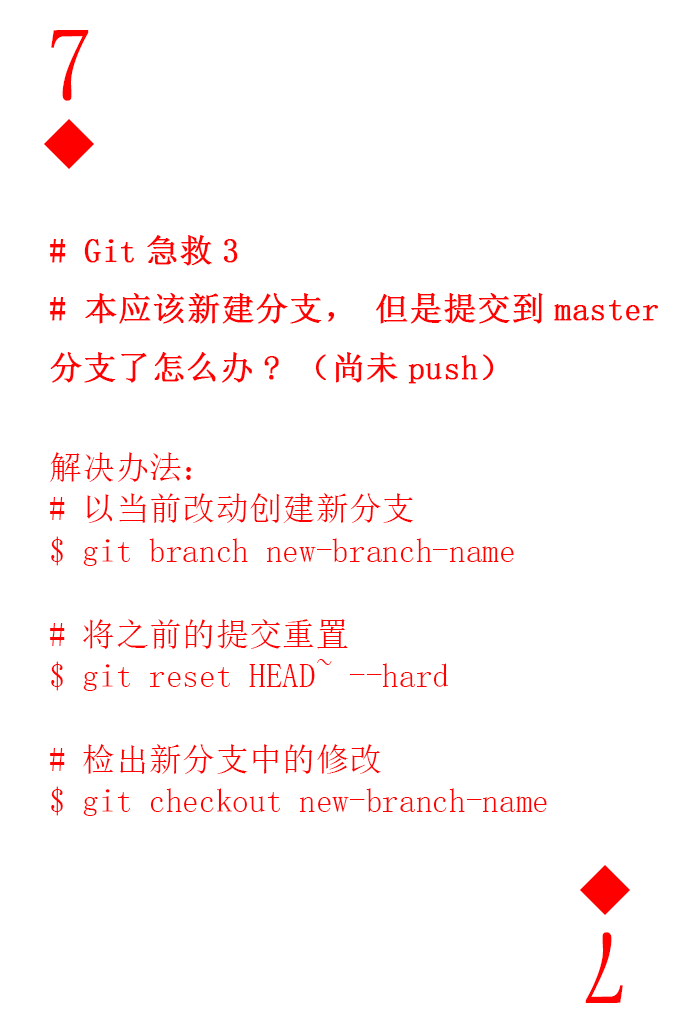
<style>
.page{position:relative;width:673px;height:1028px;background:#ffffff}
.page>*{position:absolute;margin:0}
.t1{font:104.2px "SimSun-ExtB";color:#ff0101;scale:0.93 1}
.t2{font:33.3px/41.7px "SimSun";color:#ff0101}
.t3{font:33.3px "SimSun";color:#ff0101;font-weight:bold}
</style>
<div class="page">
<p class="t1" style="left:51px;top:30px;width:38px;height:71px">7</p>
<p class="t2" style="left:50px;top:235px;width:608px;height:581px"><span class="t3"># Git急救3<br># 本应该新建分支，但是提交到master<br>分支了怎么办?（尚未push）<br></span><br>解决办法：<br># 以当前改动创建新分支<br>$ git branch new-branch-name<br><br># 将之前的提交重置<br>$ git reset HEAD~ --hard<br><br># 检出新分支中的修改<br>$ git checkout new-branch-name</p>
<p class="t1" style="left:585px;top:932px;width:38px;height:71px;rotate:180deg">7</p>
</div>
